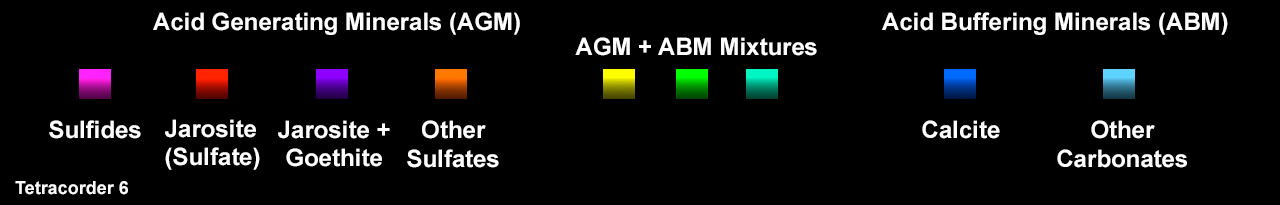
<style>
.page{position:relative;width:1280px;height:205px;background:#000000}
.page>*{position:absolute;margin:0}
.t1{font:24px "Arial-BoldMT";color:#fefefe}
.t2{font:18px "Arial-BoldMT";color:#f9faf9}
</style>
<div class="page">
<p class="t1" style="left:153px;top:12px;width:367px;height:23px">Acid Generating Minerals (AGM)</p>
<p class="t1" style="left:882px;top:12px;width:346px;height:23px">Acid Buffering Minerals (ABM)</p>
<p class="t1" style="left:575px;top:37px;width:242px;height:19px">AGM + ABM Mixtures</p>
<p class="t1" style="left:49px;top:120px;width:92px;height:19px">Sulfides</p>
<p class="t1" style="left:165px;top:119px;width:95px;height:51px">Jarosite<br>(Sulfate)</p>
<p class="t1" style="left:278px;top:120px;width:112px;height:47px;text-align:center">Jarosite +<br>Goethite</p>
<p class="t1" style="left:407px;top:120px;width:92px;height:48px;text-align:center">Other<br>Sulfates</p>
<p class="t1" style="left:922px;top:120px;width:78px;height:19px">Calcite</p>
<p class="t1" style="left:1057px;top:120px;width:130px;height:48px;text-align:center">Other<br>Carbonates</p>
<p class="t2" style="left:15px;top:181px;width:113px;height:14px">Tetracorder 6</p>
</div>
